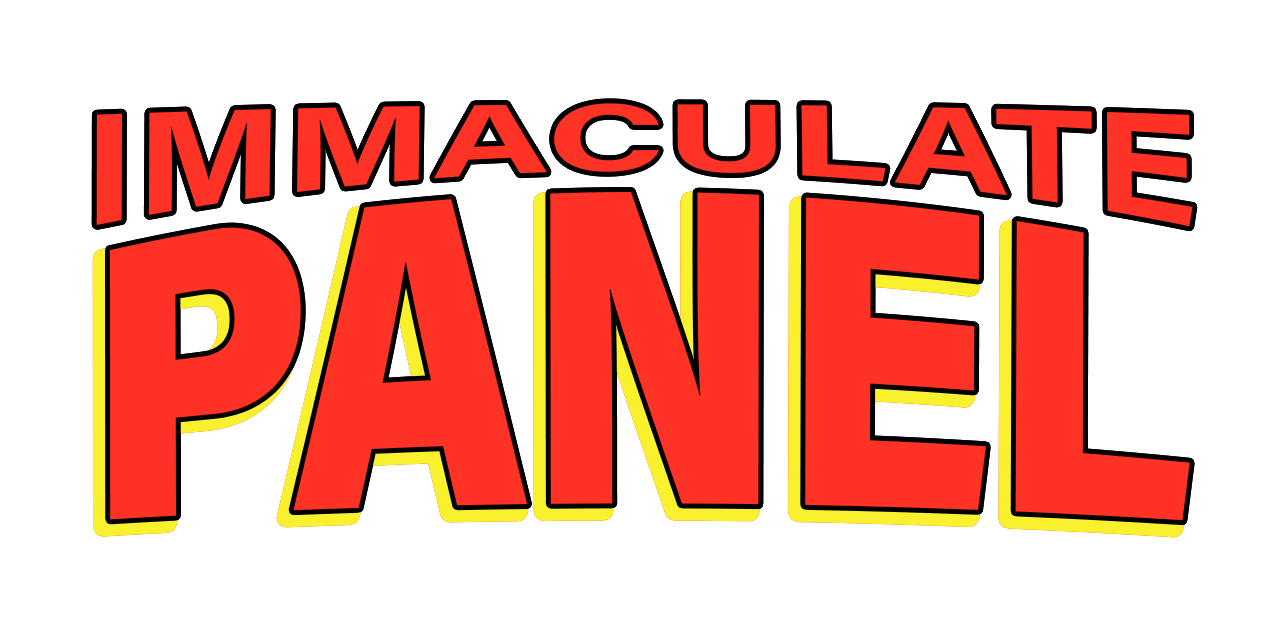
<style>
.page{position:relative;width:1280px;height:640px;background:#ffffff}
.page>*{position:absolute;margin:0}
.t1{font:163px "AcuminConcept-Bold";color:#fe3225}
.t2{font:385.2px "AcuminConcept-Black";color:#fe3225;scale:0.86 1}
</style>
<div class="page">
<p class="t1" style="left:96px;top:103px;width:1097px;height:124px">IMMACULATE</p>
<p class="t1" style="left:96px;top:103px;width:1097px;height:124px">IMMACULATE</p>
<p class="t2" style="left:110px;top:192px;width:1080px;height:329px">PANEL</p>
<p class="t2" style="left:110px;top:192px;width:1080px;height:329px">PANEL</p>
</div>
